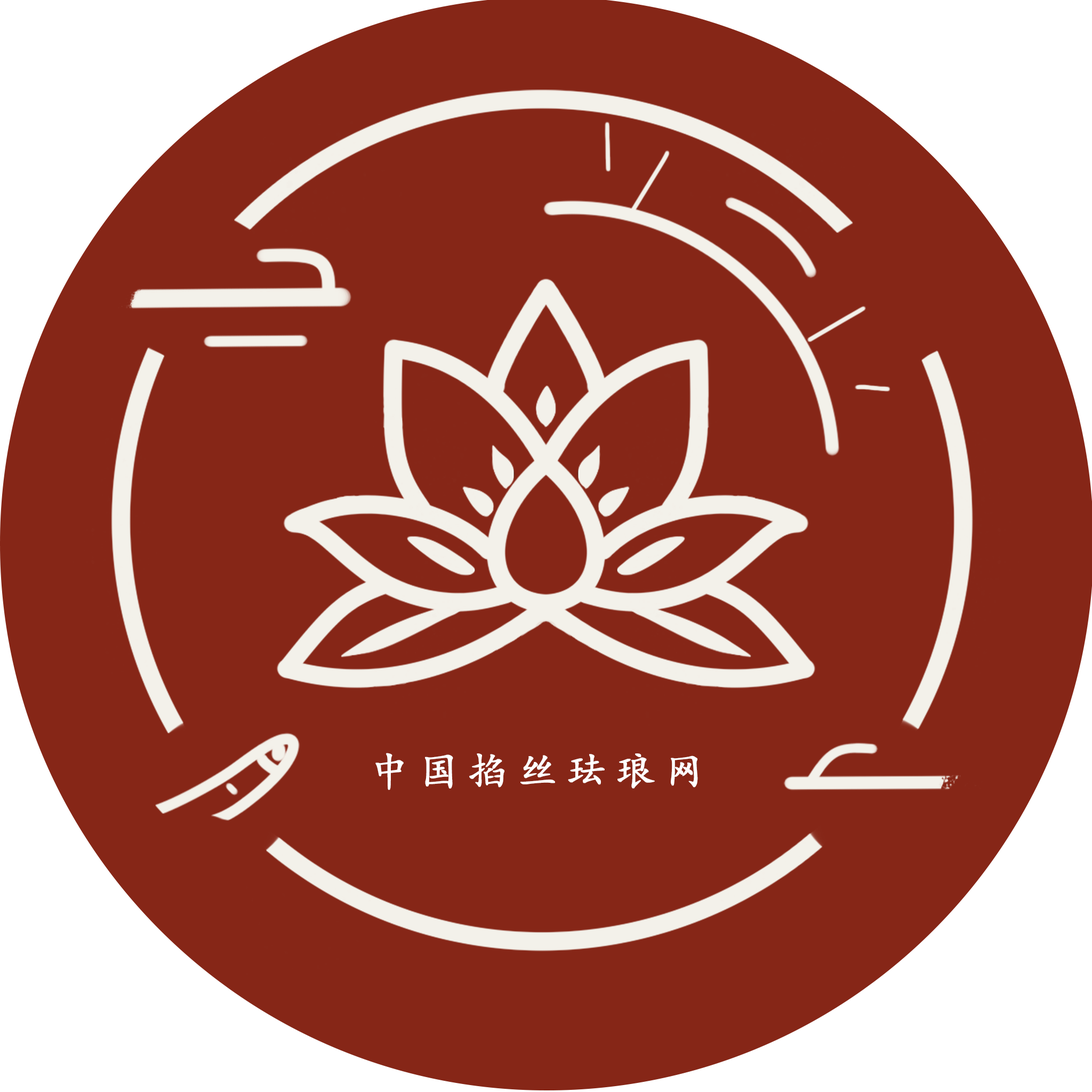
<style>
.page{position:relative;width:1092px;height:1092px;background:#862617}
.page>*{position:absolute;margin:0}
.t1{font:40px "KaiTi";letter-spacing:0.2em;color:#ffffff;font-weight:bold}
</style>
<div class="page">
<p class="t1" style="left:375px;top:753px;width:323px;height:37px">中国掐丝珐琅网</p>
</div>
